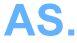
<style>
.page{position:relative;width:77px;height:43px;background:#ffffff}
.page>*{position:absolute;margin:0}
.t1{font:44px "Arial-BoldMT";color:#63b2ff}
</style>
<div class="page">
<p class="t1" style="left:4px;top:3px;width:71px;height:33px">AS.</p>
</div>
